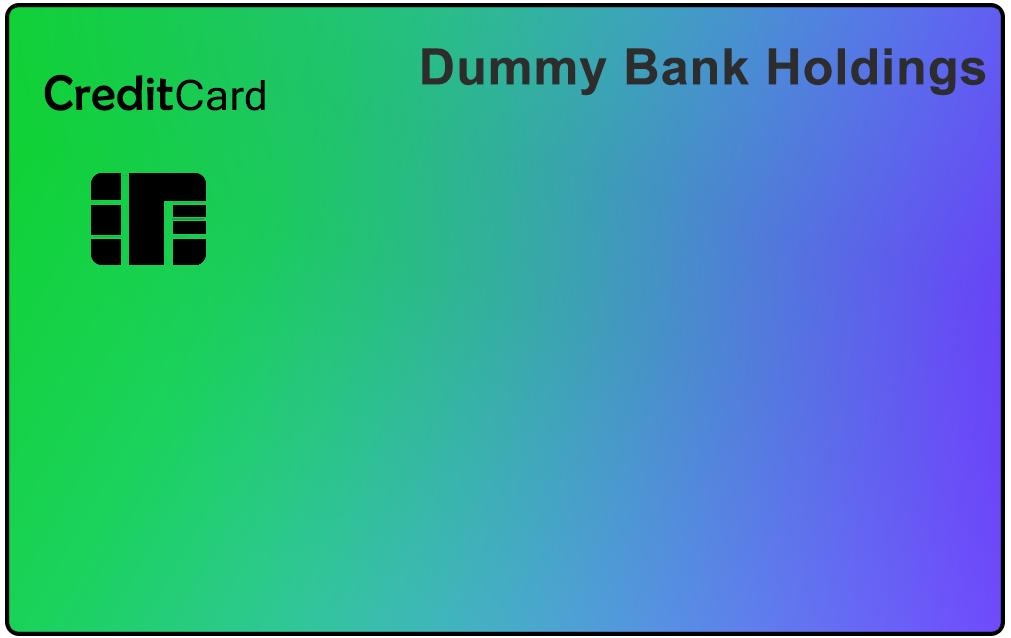
<style>
.page{position:relative;width:1011px;height:638px}
.page>*{position:absolute;margin:0}
.t1{font:50.3px "Arial-BoldMT";letter-spacing:0.02em;color:#2d2d2d}
.t2{font:50px "BerlinSansFB-Reg";letter-spacing:0.02em;color:#000000}
.t3{font:41.7px "BrushScriptMT";letter-spacing:0.02em;color:#000000}
.t4{font:41.7px "MicrosoftSansSerif";letter-spacing:0.02em;color:#000000}
</style>
<div class="page">
<p class="t1" style="left:422px;top:48px;width:564px;height:48px">Dummy Bank Holdings</p>
<p class="t2" style="left:44px;top:74px;width:221px;height:37px"><span class="t3"> </span>Credit<span class="t4">Card</span></p>
</div>
